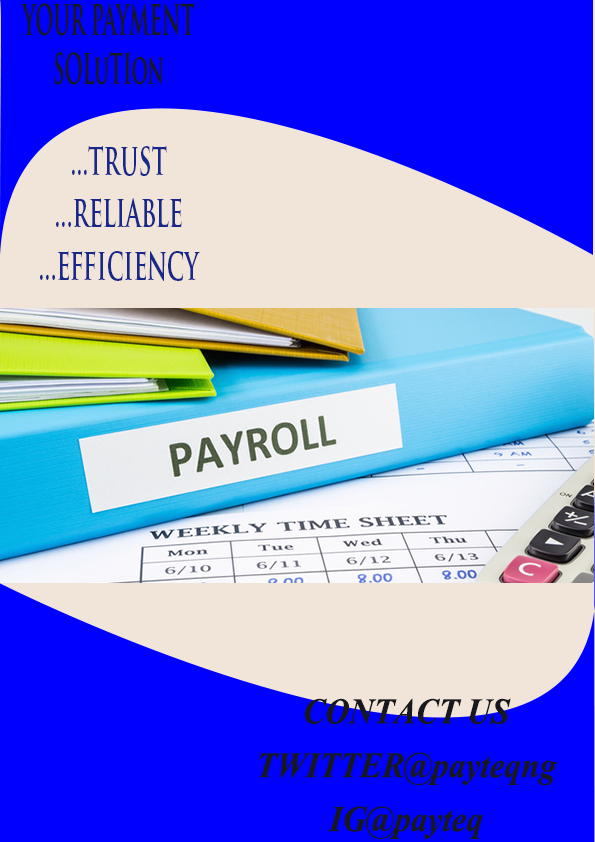
<style>
.page{position:relative;width:595px;height:842px;background:#0000ff}
.page>*{position:absolute;margin:0}
.t1{font:40.8px "TrajanPro-Bold";color:#17181d;scale:0.48 1}
.t2{font:43.6px "TrajanPro-Bold";color:#18278a;scale:0.56 1}
.t3{font:44.9px "Vijaya-Bold";color:#17181d;scale:0.92 1}
</style>
<div class="page">
<p class="t1" style="left:21px;top:3px;width:174px;height:82px;text-align:center">YOUR PAYMENT SOLuTIon</p>
<p class="t2" style="left:40px;top:146px;width:160px;height:135px;text-align:center">trust...<br>reliable...<br>efficiency...</p>
<p class="t3" style="left:258px;top:698px;width:299px;height:141px;text-align:center">CONTACT US<br>TWITTER@payteqng<br>IG@payteq</p>
</div>
